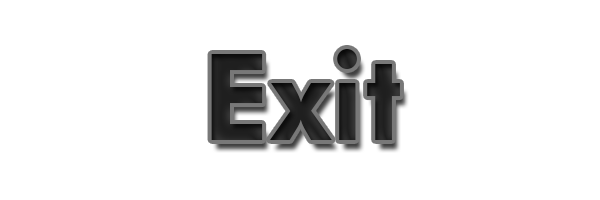
<style>
.page{position:relative;width:600px;height:200px;background:#ffffff}
.page>*{position:absolute;margin:0}
.t1{font:120px "FuturaBT-Heavy";color:#212121}
</style>
<div class="page">
<p class="t1" style="left:211px;top:49px;width:189px;height:91px">Exit</p>
</div>
